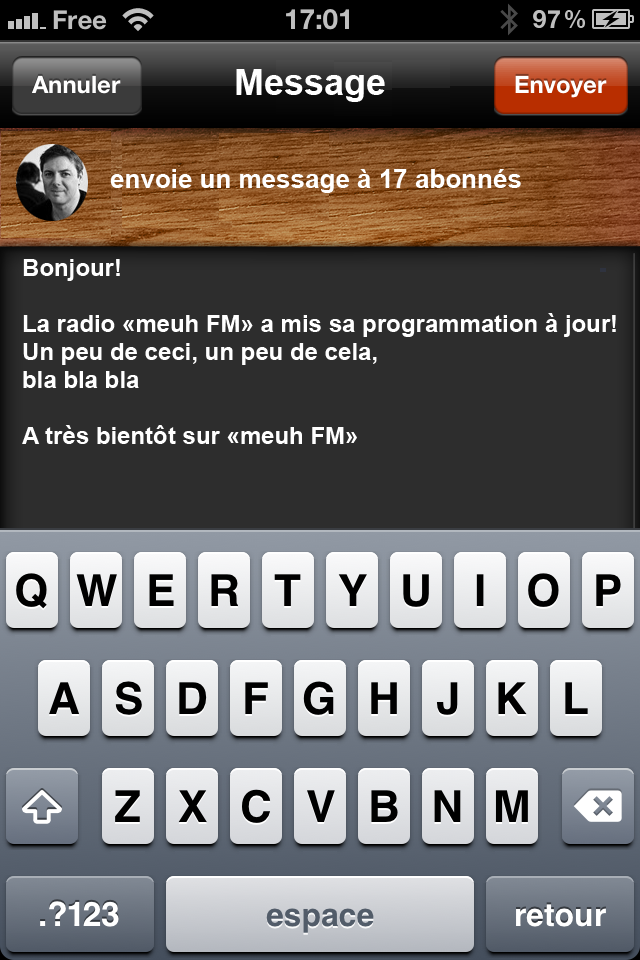
<style>
.page{position:relative;width:640px;height:960px;background:#2d2d2d}
.page>*{position:absolute;margin:0}
.t1{font:36px "Arial-BoldMT";color:#ffffff}
.t2{font:26px "Arial-BoldMT";color:#ffffff}
.t3{font:24px/28px "Arial-BoldMT";color:#ffffff}
</style>
<div class="page">
<p class="t1" style="left:236px;top:69px;width:149px;height:33px">Message</p>
<p class="t2" style="left:110px;top:169px;width:411px;height:24px">envoie un message à 17 abonnés</p>
<p class="t3" style="left:22px;top:259px;width:594px;height:185px">Bonjour!<br><br>La radio «meuh FM» a mis sa programmation à jour!<br>Un peu de ceci, un peu de cela, <br>bla bla bla<br><br>A très bientôt sur «meuh FM»</p>
</div>
